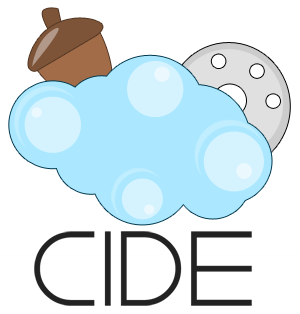
<style>
.page{position:relative;width:300px;height:314px;background:#ffffff}
.page>*{position:absolute;margin:0}
.t1{font:105.2px "CiudadNuevaCAPS";letter-spacing:0.05em;color:#222222}
</style>
<div class="page">
<p class="t1" style="left:34px;top:231px;width:218px;height:75px">CIDE</p>
</div>
